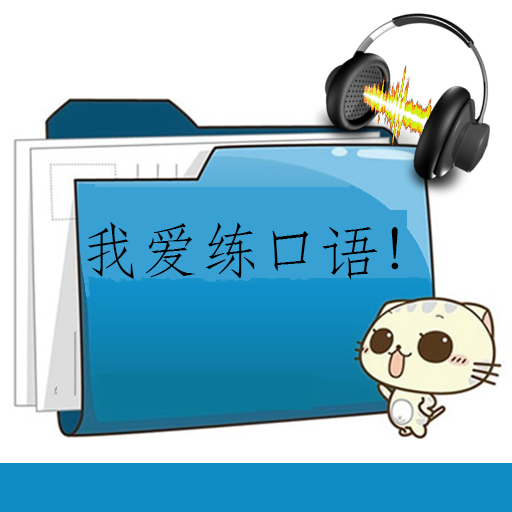
<style>
.page{position:relative;width:512px;height:512px;background:#ffffff}
.page>*{position:absolute;margin:0}
.t1{font:60px "STFangsong";color:#000000}
</style>
<div class="page">
<p class="t1" style="left:86px;top:222px;width:313px;height:58px">我爱练口语！</p>
</div>
